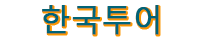
<style>
.page{position:relative;width:200px;height:40px;background:#ffffff}
.page>*{position:absolute;margin:0}
.t1{font:30px "MalgunGothic";color:#006478;font-weight:bold}
</style>
<div class="page">
<p class="t1" style="left:42px;top:5px;width:117px;height:30px">한국투어</p>
</div>
